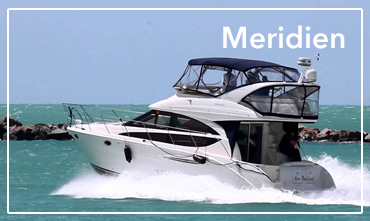
<style>
.page{position:relative;width:370px;height:221px}
.page>*{position:absolute;margin:0}
.t1{font:30px "AvenirNext-DemiBold";color:#ffffff}
</style>
<div class="page">
<p class="t1" style="left:223px;top:25px;width:122px;height:24px">Meridien</p>
</div>
